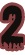
<style>
.page{position:relative;width:25px;height:55px;background:#130f0c}
.page>*{position:absolute;margin:0}
.t1{font:45.8px "CSNPWDTNFI";color:#130f0c}
</style>
<div class="page">
<p class="t1" style="left:1px;top:5px;width:23px;height:44px">2</p>
</div>
